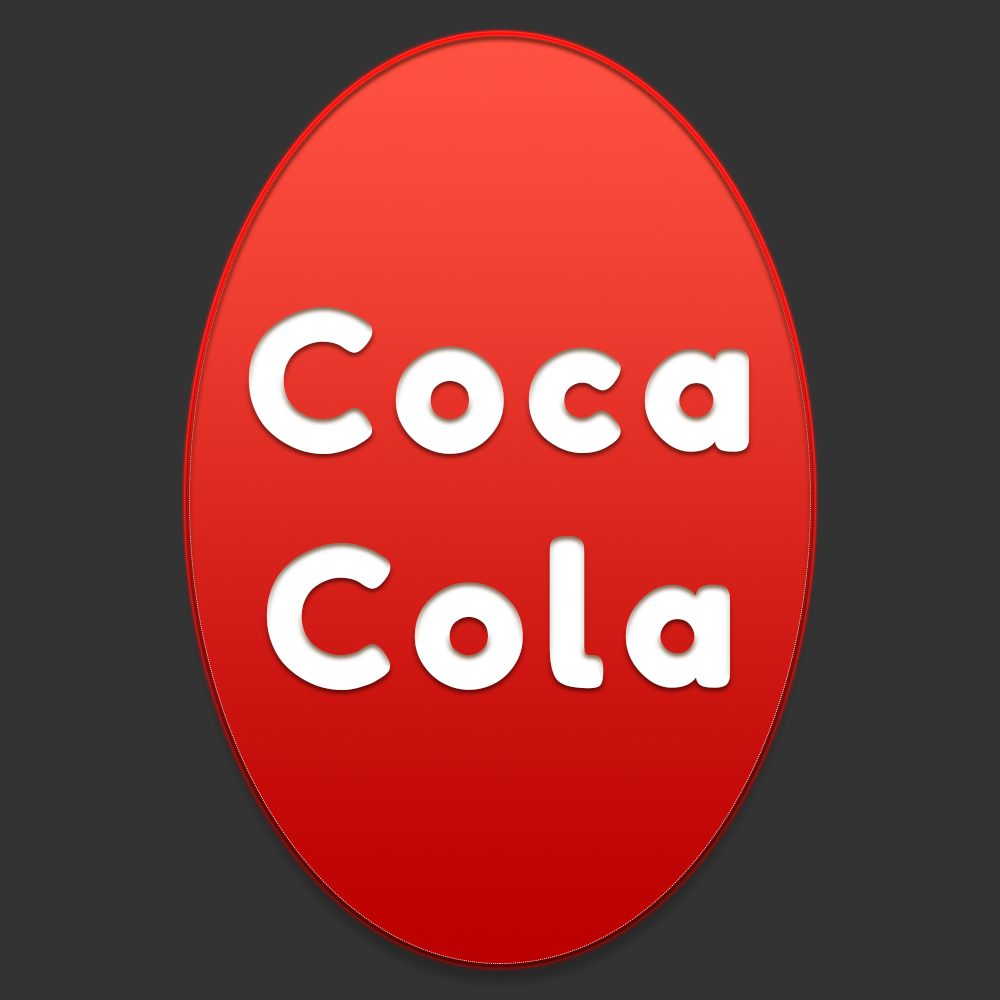
<style>
.page{position:relative;width:1000px;height:1000px;background:#333333}
.page>*{position:absolute;margin:0}
.t1{font:196px "FredokaOne-Regular";letter-spacing:0.075em;color:#ffffff}
</style>
<div class="page">
<p class="t1" style="left:248px;top:306px;width:501px;height:384px;text-align:center">Coca Cola</p>
</div>
